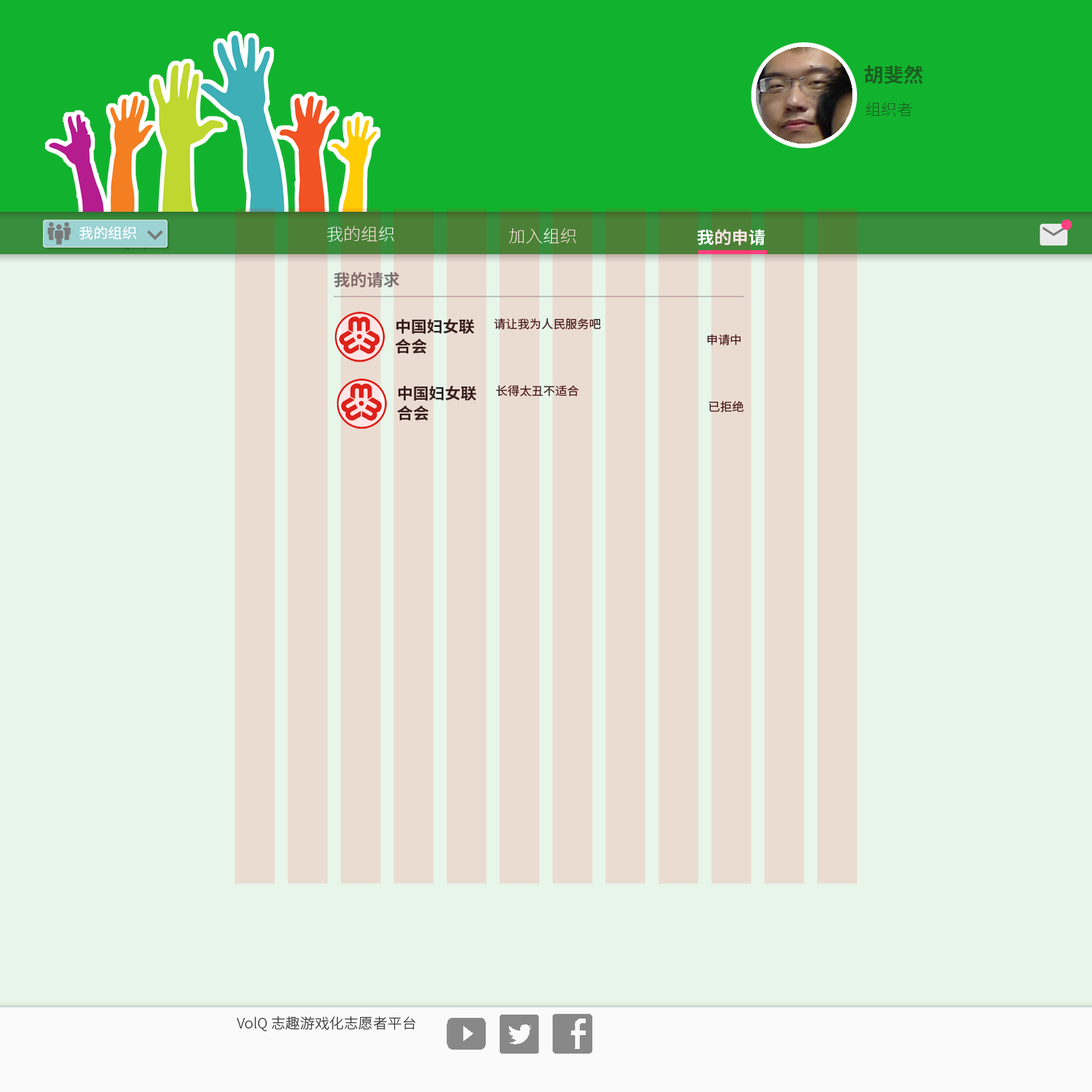
<style>
.page{position:relative;width:1092px;height:1092px;background:#e8f5e9}
.page>*{position:absolute;margin:0}
.t1{font:19.5px "NotoSansCJKsc-Bold";color:#1b5e20}
.t2{font:15.6px "NotoSansCJKsc-Thin";color:#1b5e20}
.t3{font:14.3px "NotoSansCJKsc-Regular";color:#ffffff}
.t4{font:16.9px "NotoSansCJKsc-Thin"}
.t5{font:16.9px "NotoSansCJKsc-Thin";color:#ffe5e5}
.t6{font:16.9px "NotoSansCJKsc-Bold"}
.t7{font:16.2px "NotoSansCJKsc-Bold";color:#777777}
.t8{font:15.6px/19.9px "NotoSansCJKsc-Bold";color:#222121}
.t9{font:11.7px "NotoSansCJKsc-Regular";color:#391e1e}
.t10{font:14.3px "NotoSansCJKsc-Light";color:#353535}
</style>
<div class="page">
<p class="t1" style="left:864px;top:65px;width:59px;height:19px">胡斐然</p>
<p class="t2" style="left:866px;top:102px;width:47px;height:14px">组织者</p>
<p class="t3" style="left:79px;top:226px;width:57px;height:14px">我的组织</p>
<p class="t4" style="left:327px;top:226px;width:67px;height:16px">我的组织</p>
<p class="t5" style="left:509px;top:228px;width:67px;height:16px">加入组织</p>
<p class="t6" style="left:697px;top:229px;width:68px;height:17px">我的申请</p>
<p class="t7" style="left:334px;top:272px;width:66px;height:16px">我的请求</p>
<p class="t8" style="left:395px;top:319px;width:80px;height:35px">中国妇女联<br>合会</p>
<p class="t9" style="left:494px;top:318px;width:107px;height:12px">请让我为人民服务吧</p>
<p class="t9" style="left:707px;top:334px;width:34px;height:11px">申请中</p>
<p class="t8" style="left:397px;top:386px;width:80px;height:35px">中国妇女联<br>合会</p>
<p class="t9" style="left:496px;top:385px;width:83px;height:11px">长得太丑不适合</p>
<p class="t9" style="left:709px;top:401px;width:35px;height:11px">已拒绝</p>
<p class="t10" style="left:237px;top:1016px;width:179px;height:15px">VolQ 志趣游戏化志愿者平台</p>
</div>
